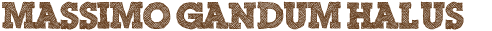
<style>
.page{position:relative;width:492px;height:31px;background:#ffffff}
.page>*{position:absolute;margin:0}
.t1{font:36px "ScribbleBoxDEMO";color:#684121}
</style>
<div class="page">
<p class="t1" style="left:2px;top:1px;width:462px;height:29px">Massimo Gandum Halus</p>
</div>
